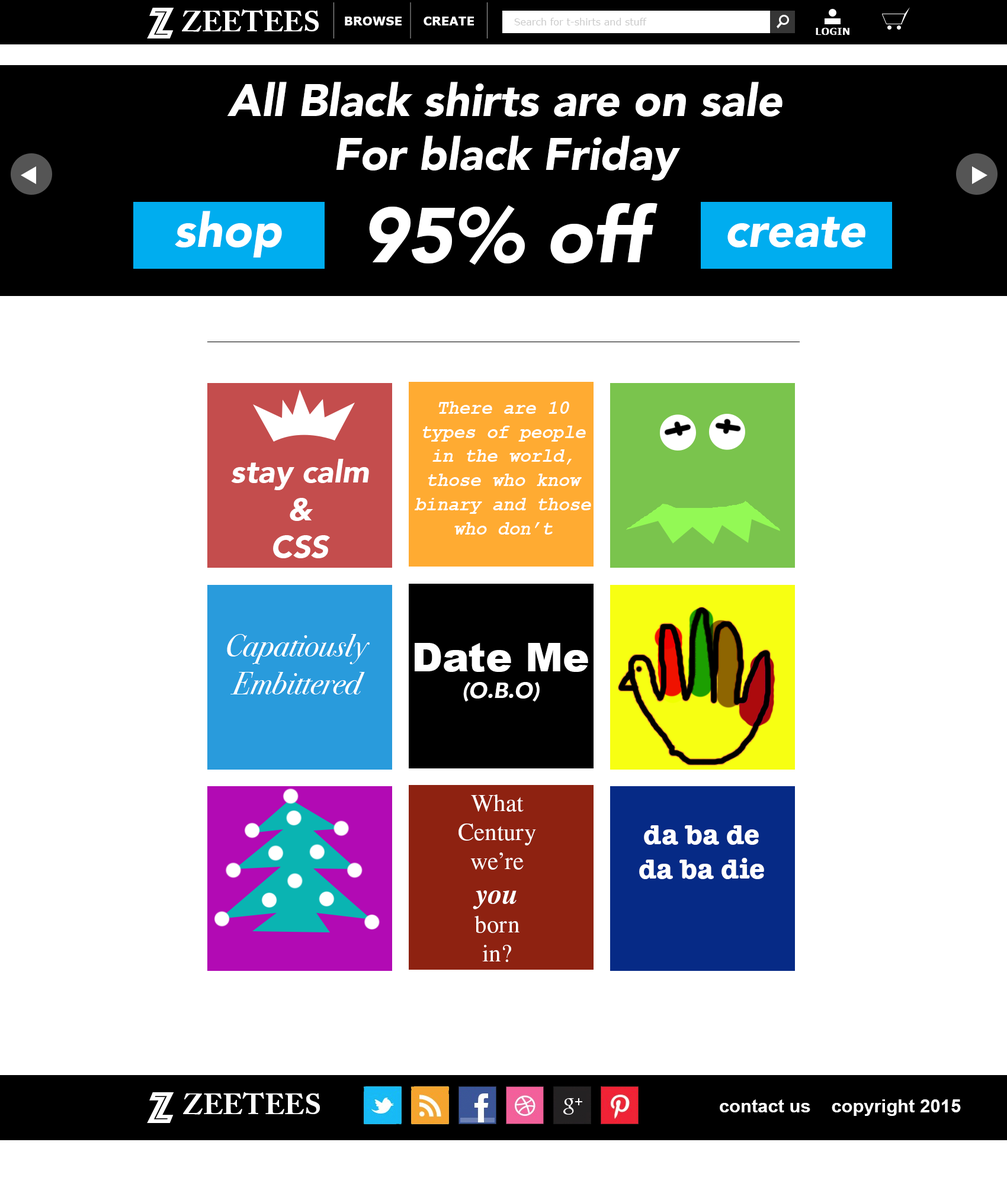
<style>
.page{position:relative;width:1007px;height:1184px;background:#ffffff}
.page>*{position:absolute;margin:0}
.t1{font:46.2px "Phosphate-Inline";color:#ffffff;scale:1.06 1}
.t2{font:29px "ACaslonPro-Bold";color:#ffffff}
.t3{font:11.8px "Verdana-Bold";color:#ffffff}
.t4{font:9.5px "Verdana";color:#cacaca}
.t5{font:9.5px "Verdana-Bold";color:#ffffff}
.t6{font:45px "Avenir-BlackOblique";color:#ffffff}
.t7{font:77px "Avenir-BlackOblique";color:#ffffff}
.t8{font:47.4px "Avenir-BlackOblique";color:#ffffff}
.t9{font:20.1px "CourierNewPS-BoldItalicMT";color:#ffffff;scale:0.91 1}
.t10{font:31.4px "Avenir-BlackOblique";color:#ffffff}
.t11{font:31.4px "BodoniSvtyTwoOSITCTT-BookIt";color:#ffffff}
.t12{font:39.7px "Arial-Black";color:#ffffff}
.t13{font:21.9px "Avenir-BlackOblique";color:#ffffff}
.t14{font:24.3px "STIXGeneral-Regular";color:#ffffff}
.t15{font:28.4px "STIXGeneral-BoldItalic";color:#ffffff}
.t16{font:28.4px "AmericanTypewriter-Bold";color:#ffffff}
.t17{font:18.4px "Arial-BoldMT";color:#ffffff}
</style>
<div class="page">
<p class="t1" style="left:147px;top:8px;width:27px;height:30px">Z</p>
<p class="t2" style="left:182px;top:9px;width:137px;height:23px">ZEETEES</p>
<p class="t3" style="left:345px;top:17px;width:57px;height:8px">BROWSE</p>
<p class="t3" style="left:423px;top:17px;width:51px;height:8px">CREATE</p>
<p class="t4" style="left:514px;top:18px;width:133px;height:7px">Search for t-shirts and stuff</p>
<p class="t5" style="left:815px;top:28px;width:34px;height:7px">LOGIN</p>
<p class="t6" style="left:227px;top:82px;width:555px;height:183px;text-align:center">All Black shirts are on sale<br>For black Friday<br><span class="t7">95% off</span></p>
<p class="t8" style="left:175px;top:211px;width:107px;height:47px">shop</p>
<p class="t8" style="left:727px;top:217px;width:138px;height:31px">create</p>
<p class="t9" style="left:415px;top:402px;width:176px;height:133px;text-align:center">There are 10<br>types of people<br>in the world,<br>those who know<br>binary and those<br>who don’t</p>
<p class="t10" style="left:231px;top:459px;width:138px;height:99px;text-align:center">stay calm<br>&amp;<br>CSS</p>
<p class="t11" style="left:227px;top:634px;width:143px;height:61px;text-align:center">Capatiously<br>Embittered</p>
<p class="t12" style="left:415px;top:643px;width:173px;height:59px;text-align:center">Date Me<br><span class="t13">(O.B.O)</span></p>
<p class="t14" style="left:458px;top:795px;width:78px;height:167px;text-align:center">What<br>Century<br>we’re<br><span class="t15">you<br></span>born<br>in?</p>
<p class="t16" style="left:639px;top:826px;width:125px;height:53px;text-align:center">da ba de<br>da ba die</p>
<p class="t1" style="left:147px;top:1093px;width:27px;height:30px">Z</p>
<p class="t2" style="left:183px;top:1092px;width:137px;height:23px">ZEETEES</p>
<p class="t17" style="left:720px;top:1100px;width:241px;height:16px">contact us    copyright 2015</p>
</div>
